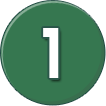
<style>
.page{position:relative;width:106px;height:106px;background:#367750}
.page>*{position:absolute;margin:0}
.t1{font:66.7px "AvantGarde-Demi";color:#ffffff}
</style>
<div class="page">
<p class="t1" style="left:43px;top:28px;width:16px;height:50px">1</p>
</div>
